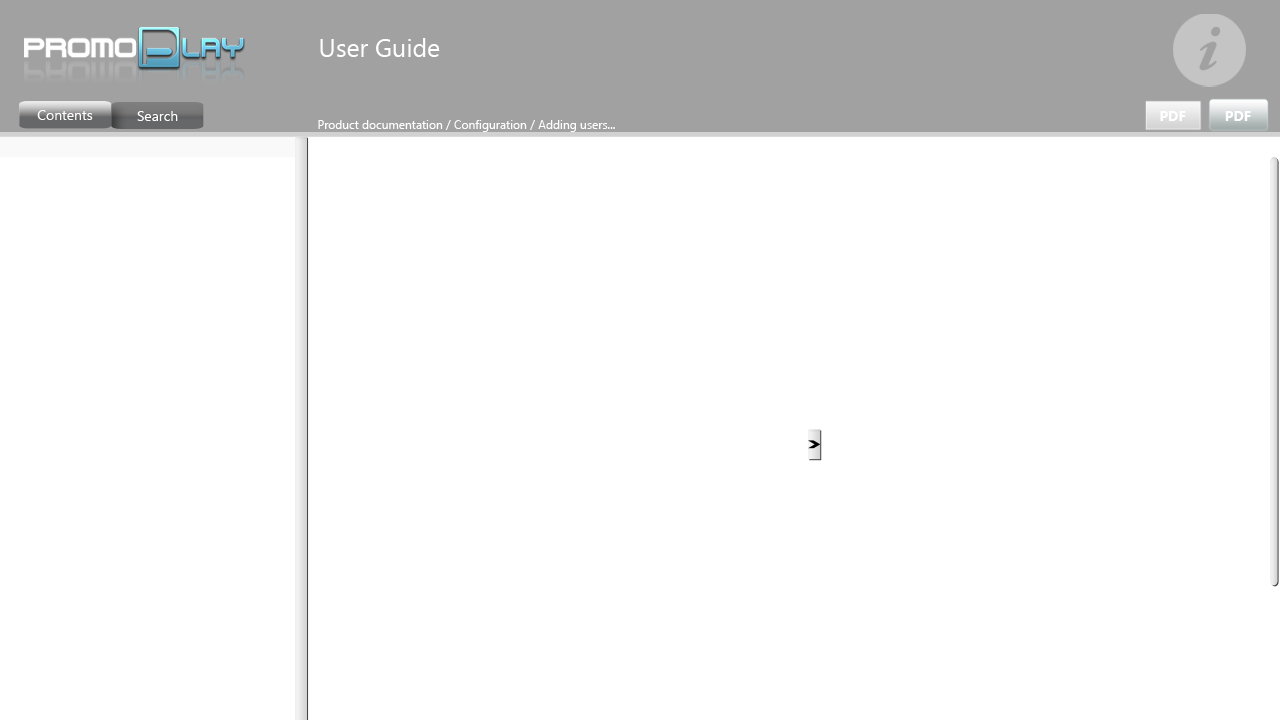
<style>
.page{position:relative;width:1280px;height:720px;background:#ffffff}
.page>*{position:absolute;margin:0}
.t1{font:25px "SegoeUI";color:#ffffff}
.t2{font:14px "SegoeUI";color:#ffffff}
.t3{font:14px "SegoeUI-Bold";color:#ffffff}
.t4{font:12px "SegoeUI";color:#ffffff}
</style>
<div class="page">
<p class="t1" style="left:320px;top:38px;width:120px;height:19px">User Guide</p>
<p class="t2" style="left:37px;top:110px;width:56px;height:10px">Contents</p>
<p class="t2" style="left:137px;top:111px;width:41px;height:10px">Search</p>
<p class="t3" style="left:1160px;top:111px;width:26px;height:10px">PDF</p>
<p class="t3" style="left:1225px;top:111px;width:26px;height:10px">PDF</p>
<p class="t4" style="left:318px;top:120px;width:297px;height:12px">Product documentation / Configuration / Adding users...</p>
</div>
